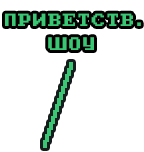
<style>
.page{position:relative;width:144px;height:152px;background:#ffffff}
.page>*{position:absolute;margin:0}
.t1{font:14.1px "PxPlus_IBM_BIOS";letter-spacing:0.075em;color:#39c773}
.t2{font:18.6px "PixelDigivolveCyrillic";letter-spacing:0.075em;color:#39c773}
</style>
<div class="page">
<p class="t1" style="left:5px;top:13px;width:136px;height:13px">ПРИВЕТСТВ.</p>
<p class="t2" style="left:48px;top:37px;width:46px;height:13px">ШОУ</p>
</div>
